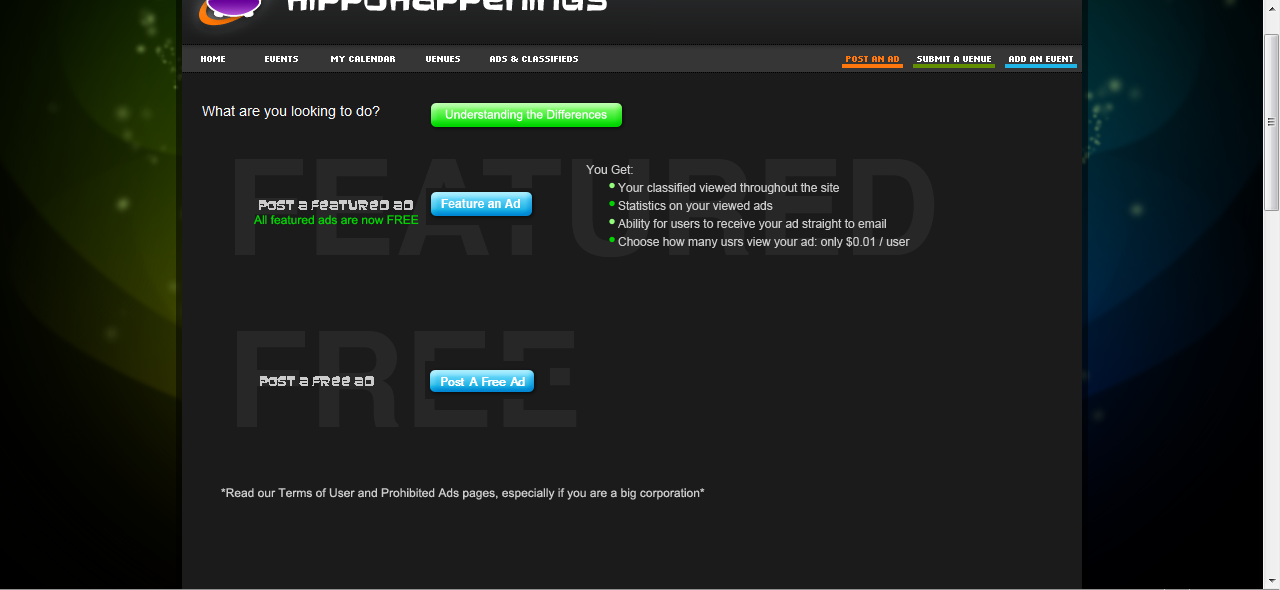
<style>
.page{position:relative;width:1280px;height:590px;background:#1b1b1b}
.page>*{position:absolute;margin:0}
.t1{font:12px/18px "ArialMT";color:#cccccc}
.t2{font:12px "Baveuse";color:#cccccc}
.t3{font:12px "ArialMT";color:#02d201}
.t4{font:12px "ArialMT";color:#cccccc}
</style>
<div class="page">
<p class="t1" style="left:586px;top:165px;width:324px;height:83px;text-align:center">You Get:<br>* Your classified viewed throughout the site<br>* Statistics on your viewed ads<br>* Ability for users to receive your ad straight to email<br>* Choose how many usrs view your ad: only $0.01 / user</p>
<p class="t2" style="left:259px;top:200px;width:154px;height:10px">Post a featured ad</p>
<p class="t3" style="left:253px;top:215px;width:166px;height:10px">All featured ads are now FREE</p>
<p class="t2" style="left:260px;top:376px;width:114px;height:10px">Post a free ad</p>
<p class="t4" style="left:221px;top:488px;width:484px;height:12px">*Read our Terms of User and Prohibited Ads pages, especially if you are a big corporation*</p>
</div>
